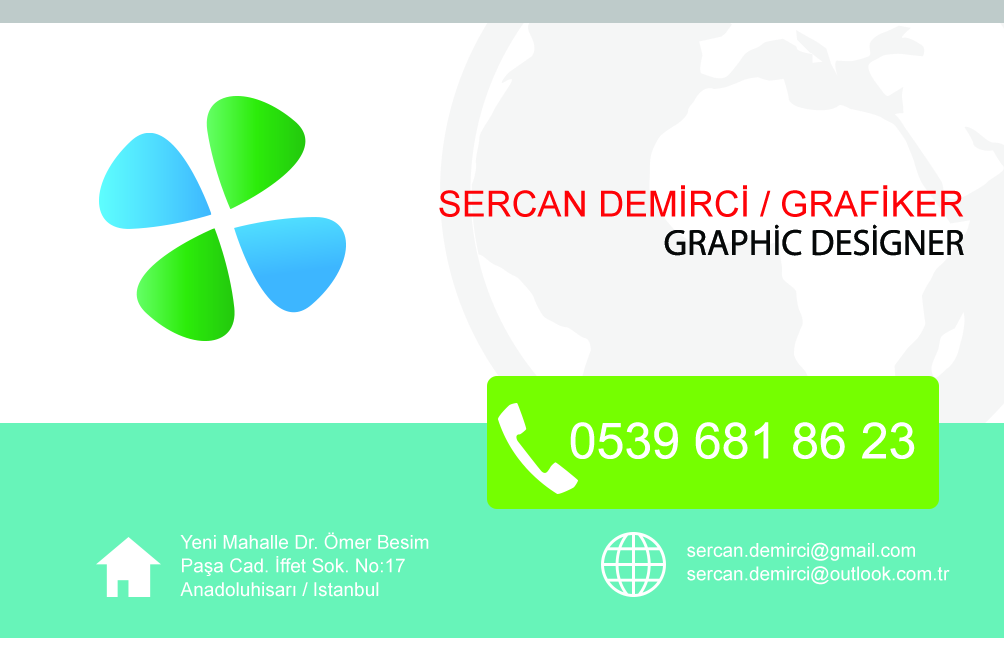
<style>
.page{position:relative;width:1004px;height:650px;background:#ffffff}
.page>*{position:absolute;margin:0}
.t1{font:36px "ArialMT";color:#fe0207}
.t2{font:36.5px "MyriadPro-Regular";color:#060808}
.t3{font:50px "ArialMT";color:#ffffff}
.t4{font:19px/23.7px "ArialMT";color:#ffffff}
</style>
<div class="page">
<p class="t1" style="left:439px;top:185px;width:525px;height:32px">SERCAN DEMİRCİ / GRAFİKER</p>
<p class="t2" style="left:664px;top:224px;width:300px;height:32px">GRAPHİC DESİGNER</p>
<p class="t3" style="left:570px;top:422px;width:345px;height:37px">0539 681 86 23</p>
<p class="t4" style="left:180px;top:532px;width:249px;height:65px">Yeni Mahalle Dr. Ömer Besim<br>Paşa Cad. İffet Sok. No:17<br>Anadoluhisarı / Istanbul</p>
<p class="t4" style="left:687px;top:542px;width:263px;height:43px">sercan.demirci@gmail.com<br>sercan.demirci@outlook.com.tr</p>
</div>
